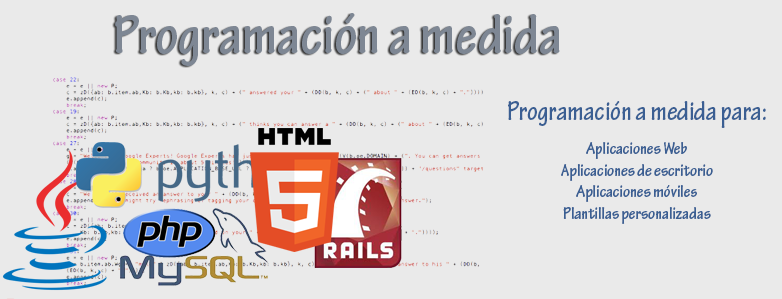
<style>
.page{position:relative;width:782px;height:299px;background:#eaeaea}
.page>*{position:absolute;margin:0}
.t1{font:60px "TektonPro-BoldCond";color:#7e8794}
.t2{font:28px "TektonPro-BoldCond";color:#3b5f93}
.t3{font:18px "TektonPro-BoldCond";color:#3b5f93}
</style>
<div class="page">
<p class="t1" style="left:115px;top:13px;width:445px;height:53px">Programación a medida</p>
<p class="t2" style="left:508px;top:101px;width:258px;height:27px">Programación a medida para:</p>
<p class="t3" style="left:561px;top:142px;width:152px;height:82px;text-align:center">Aplicaciones Web<br>Aplicaciones de escritorio<br>Aplicaciones móviles<br>Plantillas personalizadas</p>
</div>
